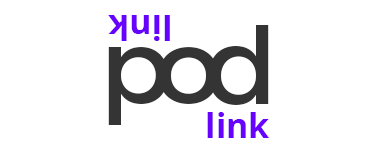
<style>
.page{position:relative;width:380px;height:150px;background:#ffffff}
.page>*{position:absolute;margin:0}
.t1{font:34.1px "OpenSans-Bold";color:#6702ff}
.t2{font:107.1px "Montserrat-Regular";letter-spacing:-0.16em;color:#343434}
</style>
<div class="page">
<p class="t1" style="left:108px;top:15px;width:62px;height:26px;rotate:180deg">link</p>
<p class="t2" style="left:108px;top:25px;width:161px;height:100px">pod</p>
<p class="t1" style="left:207px;top:112px;width:62px;height:26px">link</p>
</div>
